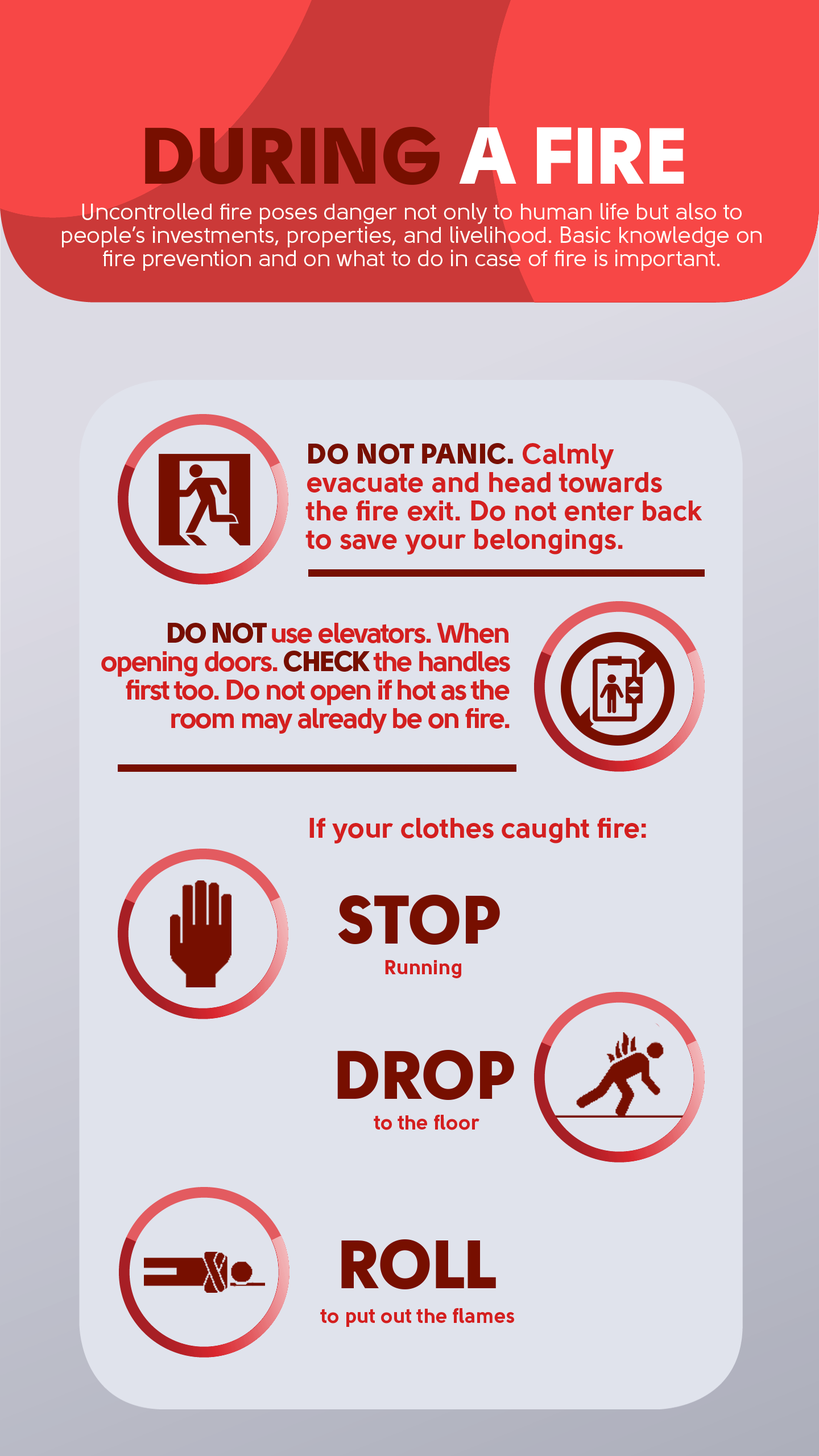
<style>
.page{position:relative;width:819px;height:1456px;background:#e0e3ec}
.page>*{position:absolute;margin:0}
.t1{font:79.6px "Solomon-Sans-Black";color:#770f00}
.t2{font:79.6px "Solomon-Sans-Black";color:#ffffff}
.t3{font:22.7px/23.3px "Solomon-Sans-Normal";color:#fffef8}
.t4{font:28.4px/28.4px "Solomon-Sans-Bold";color:#d41f1f}
.t5{font:28.4px/28.4px "Solomon-Sans-Black";color:#770f00}
.t6{font:28.4px/28.4px "Solomon-Sans-Bold";letter-spacing:-0.05em;color:#d41f1f}
.t7{font:28.4px/28.4px "Solomon-Sans-Black";letter-spacing:-0.05em;color:#770f00}
.t8{font:28.4px "Solomon-Sans-Bold";color:#d41f1f}
.t9{font:68.2px "Solomon-Sans-Black";color:#770f00}
.t10{font:20.5px "Solomon-Sans-Bold";color:#d41f1f}
</style>
<div class="page">
<p class="t1" style="left:145px;top:127px;width:539px;height:58px">DURING<span class="t2"> A FIRE</span></p>
<p class="t3" style="left:62px;top:203px;width:700px;height:68px;text-align:center">Uncontrolled fire poses danger not only to human life but also to<br>people’s investments, properties, and livelihood. Basic knowledge on<br>fire prevention and on what to do in case of fire is important.</p>
<p class="t4" style="left:305px;top:443px;width:397px;height:112px"><span class="t5">DO NOT PANIC. </span>Calmly<br>evacuate and head towards<br>the fire exit. Do not enter back<br>to save your belongings.</p>
<p class="t6" style="left:101px;top:623px;width:409px;height:111px;text-align:right"><span class="t7">DO NOT </span>use elevators. When<br>opening doors. <span class="t7">CHECK </span>the handles<br>first too. Do not open if hot as the<br>room may already be on fire.</p>
<p class="t8" style="left:309px;top:818px;width:337px;height:25px">If your clothes caught fire:</p>
<p class="t9" style="left:338px;top:895px;width:162px;height:50px">STOP</p>
<p class="t10" style="left:385px;top:960px;width:76px;height:18px">Running</p>
<p class="t9" style="left:337px;top:1050px;width:177px;height:50px">DROP</p>
<p class="t10" style="left:374px;top:1115px;width:105px;height:15px">to the floor</p>
<p class="t9" style="left:341px;top:1239px;width:155px;height:50px">ROLL</p>
<p class="t10" style="left:320px;top:1308px;width:194px;height:19px">to put out the flames</p>
</div>
